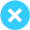
<style>
.page{position:relative;width:30px;height:30px;background:#33ccff}
.page>*{position:absolute;margin:0}
.t1{font:30px "AbadiMT-CondensedExtraBold";color:#ffffff}
</style>
<div class="page">
<p class="t1" style="left:7px;top:8px;width:15px;height:15px;rotate:44deg">+</p>
</div>
